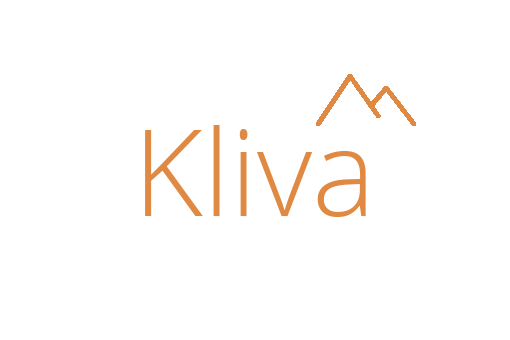
<style>
.page{position:relative;width:510px;height:340px;background:#ffffff}
.page>*{position:absolute;margin:0}
.t1{font:120px "OpenSans-Light";color:#df8943}
</style>
<div class="page">
<p class="t1" style="left:145px;top:125px;width:221px;height:92px">Kliva</p>
</div>
